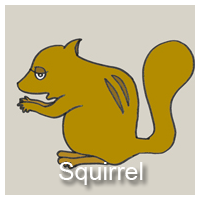
<style>
.page{position:relative;width:200px;height:200px;background:#d7d3c8}
.page>*{position:absolute;margin:0}
.t1{font:25px "ArialMT";color:#ffffff}
</style>
<div class="page">
<p class="t1" style="left:59px;top:162px;width:84px;height:23px">Squirrel</p>
</div>
